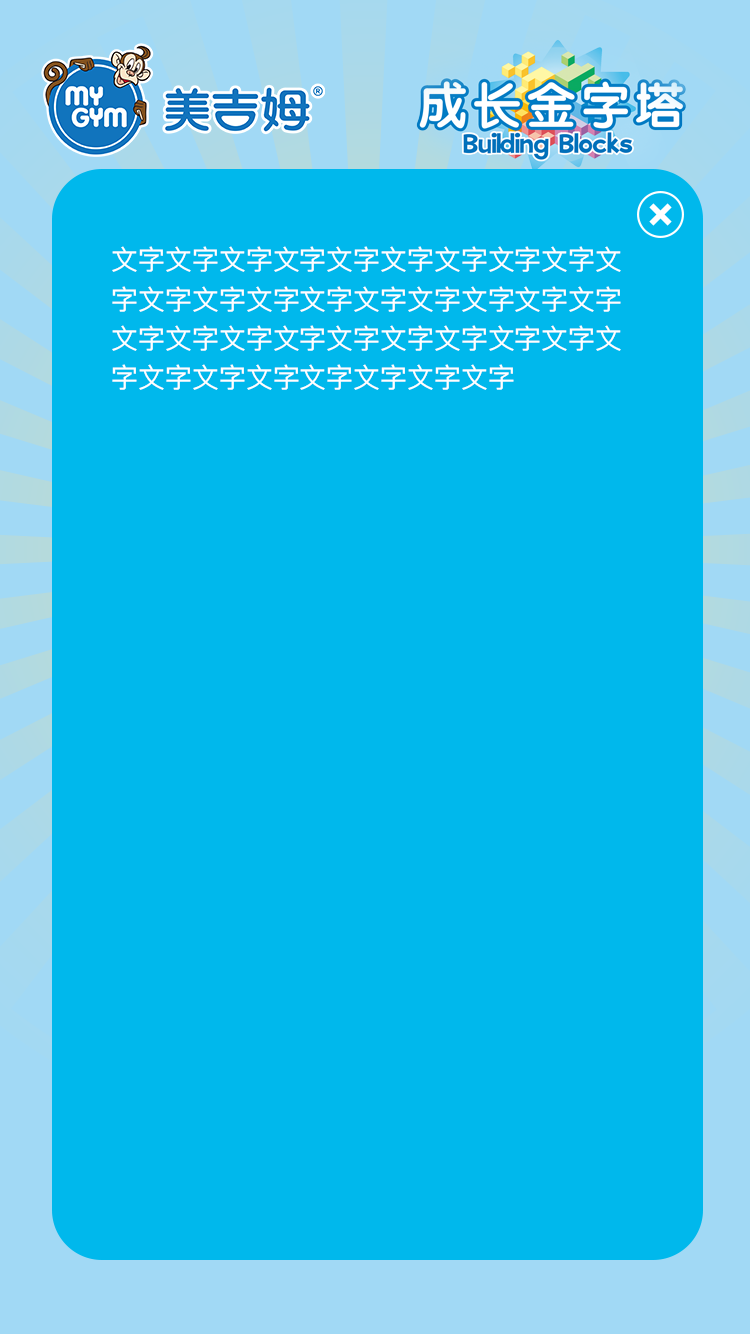
<style>
.page{position:relative;width:750px;height:1334px;background:#00b8ec}
.page>*{position:absolute;margin:0}
.t1{font:27.2px/39.4px "PingFangSC-Regular";color:#ffffff}
</style>
<div class="page">
<p class="t1" style="left:112px;top:246px;width:509px;height:144px">文字文字文字文字文字文字文字文字文字文字文字文字文字文字文字文字文字文字文字文字文字文字文字文字文字文字文字文字文字文字文字文字文字文字文字文字</p>
</div>
